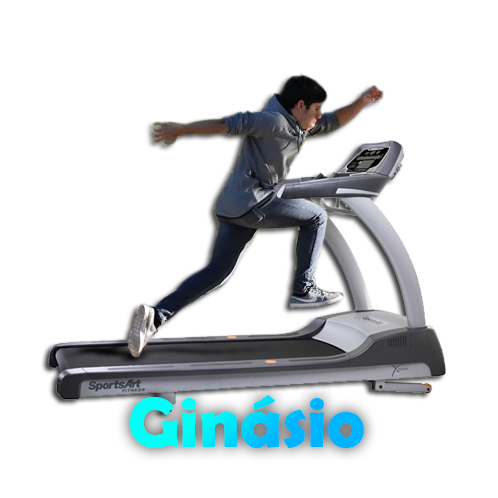
<style>
.page{position:relative;width:498px;height:498px;background:#ffffff}
.page>*{position:absolute;margin:0}
.t1{font:72px "BerlinSansFBDemi-Bold"}
</style>
<div class="page">
<p class="t1" style="left:130px;top:395px;width:234px;height:53px">Ginásio</p>
</div>
